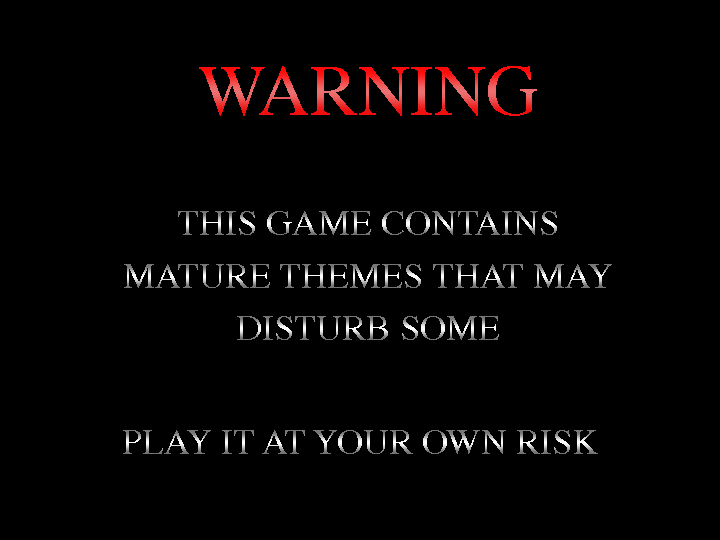
<style>
.page{position:relative;width:720px;height:540px;background:#000000}
.page>*{position:absolute;margin:0}
.t1{font:72px "TimesRomanSC&OSF"}
.t2{font:36px "TimesRomanSC&OSF"}
</style>
<div class="page">
<p class="t1" style="left:199px;top:66px;width:338px;height:50px">WARNING</p>
<p class="t2" style="left:178px;top:211px;width:379px;height:24px">THIS GAME CONTAINS</p>
<p class="t2" style="left:124px;top:264px;width:488px;height:24px">MATURE THEMES THAT MAY</p>
<p class="t2" style="left:237px;top:316px;width:262px;height:24px">DISTURB SOME</p>
<p class="t2" style="left:123px;top:430px;width:475px;height:24px">PLAY IT AT YOUR OWN RISK</p>
</div>
